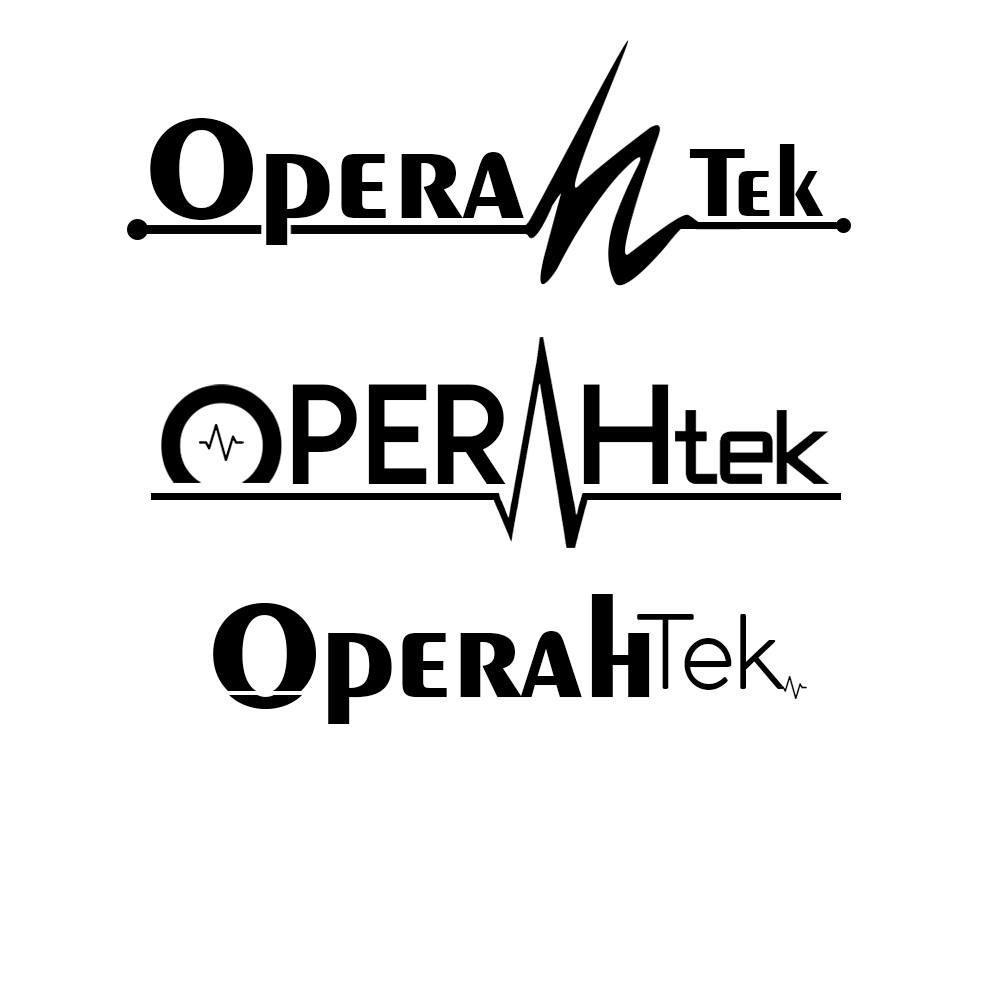
<style>
.page{position:relative;width:1000px;height:1000px;background:#ffffff}
.page>*{position:absolute;margin:0}
.t1{font:148px "Exotic350BT-Bold";letter-spacing:-0.01em;color:#000000}
.t2{font:103.2px "Exotic350BT-Bold";letter-spacing:-0.01em;color:#000000}
.t3{font:134.2px "WatchwordBoldDemo";letter-spacing:-0.01em;color:#000000}
.t4{font:148px "Exotic350BT-Bold";letter-spacing:-0.02em;color:#000000}
.t5{font:148px "Exotic350BT-Bold";letter-spacing:-0.02em;color:#ffffff}
.t6{font:101.3px "CocoGothic-Light";letter-spacing:-0.01em;color:#000000}
</style>
<div class="page">
<p class="t1" style="left:150px;top:118px;width:374px;height:127px">Opera</p>
<p class="t2" style="left:689px;top:144px;width:135px;height:72px">Tek</p>
<p class="t3" style="left:292px;top:384px;width:214px;height:100px">PER</p>
<p class="t3" style="left:583px;top:384px;width:86px;height:100px">H</p>
<p class="t4" style="left:214px;top:594px;width:436px;height:130px"><span class="t5">O</span>perah</p>
<p class="t6" style="left:637px;top:614px;width:147px;height:76px">Tek</p>
</div>
